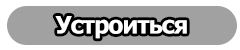
<style>
.page{position:relative;width:240px;height:50px;background:#a1a1a1}
.page>*{position:absolute;margin:0}
.t1{font:24px "Tahoma-Bold";letter-spacing:-0.035em;color:#ffffff}
</style>
<div class="page">
<p class="t1" style="left:55px;top:16px;width:132px;height:23px">Устроиться</p>
</div>
